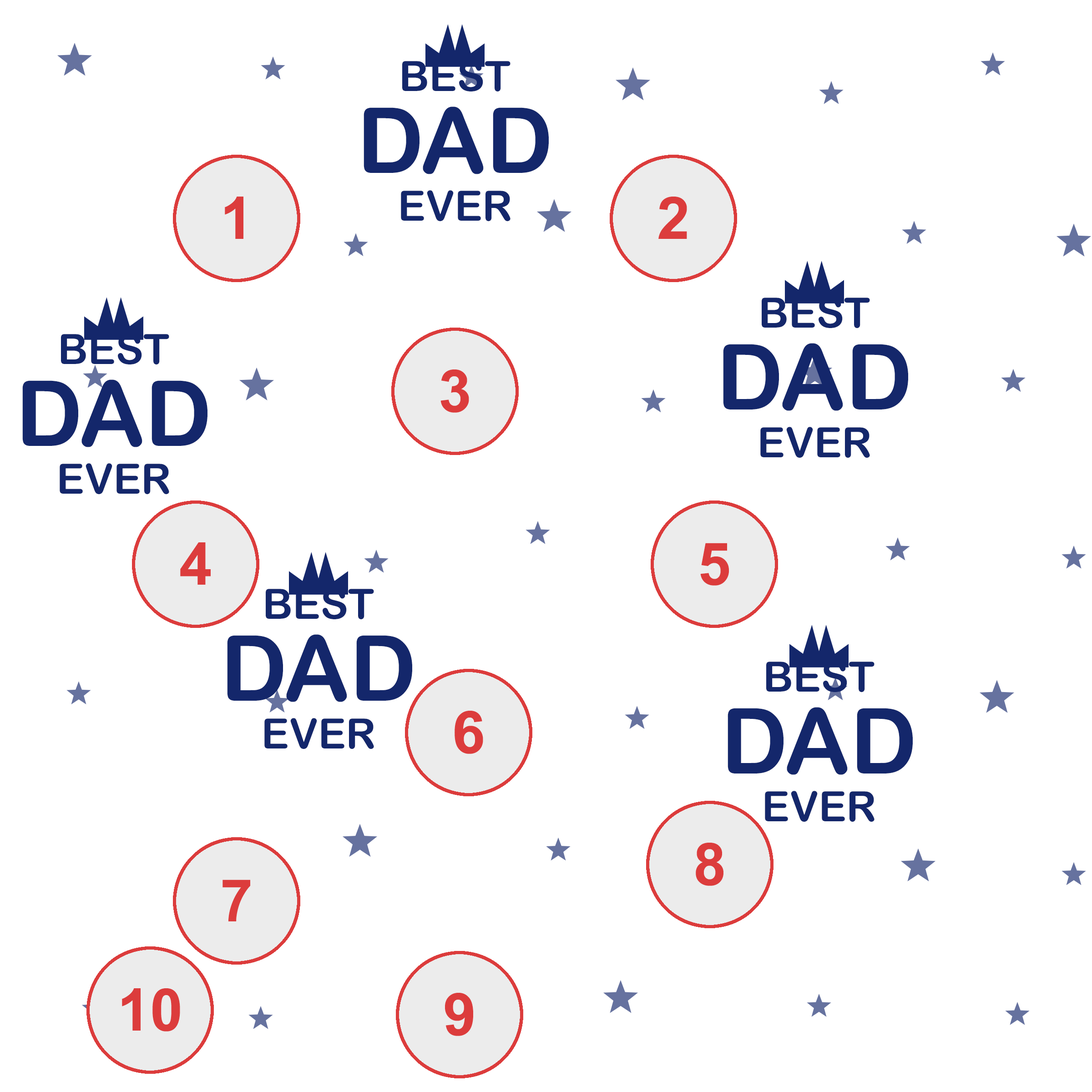
<style>
.page{position:relative;width:1092px;height:1092px;background:#ffffff}
.page>*{position:absolute;margin:0}
.t1{font:41.7px "ArialRoundedMTBold";color:#14276b}
.t2{font:91px "ArialRoundedMTBold";color:#14276b}
.t3{font:58.8px "Arial-BoldMT";color:#dc3c3c}
</style>
<div class="page">
<p class="t1" style="left:402px;top:61px;width:109px;height:30px">BEST</p>
<p class="t2" style="left:364px;top:106px;width:185px;height:68px">DAD</p>
<p class="t3" style="left:225px;top:197px;width:18px;height:42px">1</p>
<p class="t1" style="left:401px;top:190px;width:110px;height:31px">EVER</p>
<p class="t3" style="left:658px;top:197px;width:29px;height:42px">2</p>
<p class="t1" style="left:762px;top:297px;width:108px;height:31px">BEST</p>
<p class="t1" style="left:61px;top:334px;width:108px;height:30px">BEST</p>
<p class="t2" style="left:723px;top:343px;width:185px;height:68px">DAD</p>
<p class="t3" style="left:440px;top:369px;width:29px;height:44px">3</p>
<p class="t2" style="left:22px;top:379px;width:185px;height:68px">DAD</p>
<p class="t1" style="left:760px;top:427px;width:110px;height:31px">EVER</p>
<p class="t1" style="left:60px;top:463px;width:109px;height:31px">EVER</p>
<p class="t3" style="left:180px;top:542px;width:31px;height:43px">4</p>
<p class="t3" style="left:700px;top:543px;width:29px;height:43px">5</p>
<p class="t1" style="left:266px;top:588px;width:108px;height:31px">BEST</p>
<p class="t2" style="left:227px;top:634px;width:185px;height:68px">DAD</p>
<p class="t1" style="left:766px;top:661px;width:108px;height:31px">BEST</p>
<p class="t3" style="left:455px;top:711px;width:28px;height:43px">6</p>
<p class="t2" style="left:728px;top:707px;width:185px;height:68px">DAD</p>
<p class="t1" style="left:264px;top:718px;width:110px;height:31px">EVER</p>
<p class="t1" style="left:765px;top:791px;width:109px;height:31px">EVER</p>
<p class="t3" style="left:696px;top:843px;width:27px;height:43px">8</p>
<p class="t3" style="left:222px;top:880px;width:28px;height:41px">7</p>
<p class="t3" style="left:122px;top:988px;width:58px;height:43px">10</p>
<p class="t3" style="left:445px;top:993px;width:28px;height:43px">9</p>
</div>
